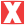
<style>
.page{position:relative;width:25px;height:25px;background:#ef3b3b}
.page>*{position:absolute;margin:0}
.t1{font:31.6px "Bauhaus93";color:#ffffff;text-transform:uppercase}
</style>
<div class="page">
<p class="t1" style="left:3px;top:2px;width:19px;height:21px">x</p>
</div>
